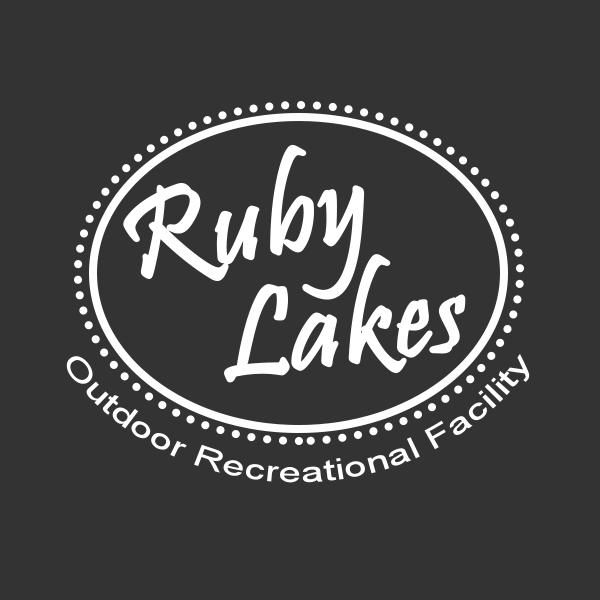
<style>
.page{position:relative;width:600px;height:600px;background:#333333}
.page>*{position:absolute;margin:0}
.t1{font:125px "Pristina-Regular";color:#ffffff;font-weight:bold}
.t2{font:28.8px "ArialMT";color:#ffffff}
</style>
<div class="page">
<p class="t1" style="left:123px;top:144px;width:242px;height:156px;rotate:-10deg">Ruby</p>
<p class="t1" style="left:224px;top:254px;width:242px;height:129px;rotate:-7deg">Lakes</p>
<p class="t2" style="left:66px;top:353px;width:464px;height:130px;text-align:center">Outdoor Recreational Facility</p>
</div>
